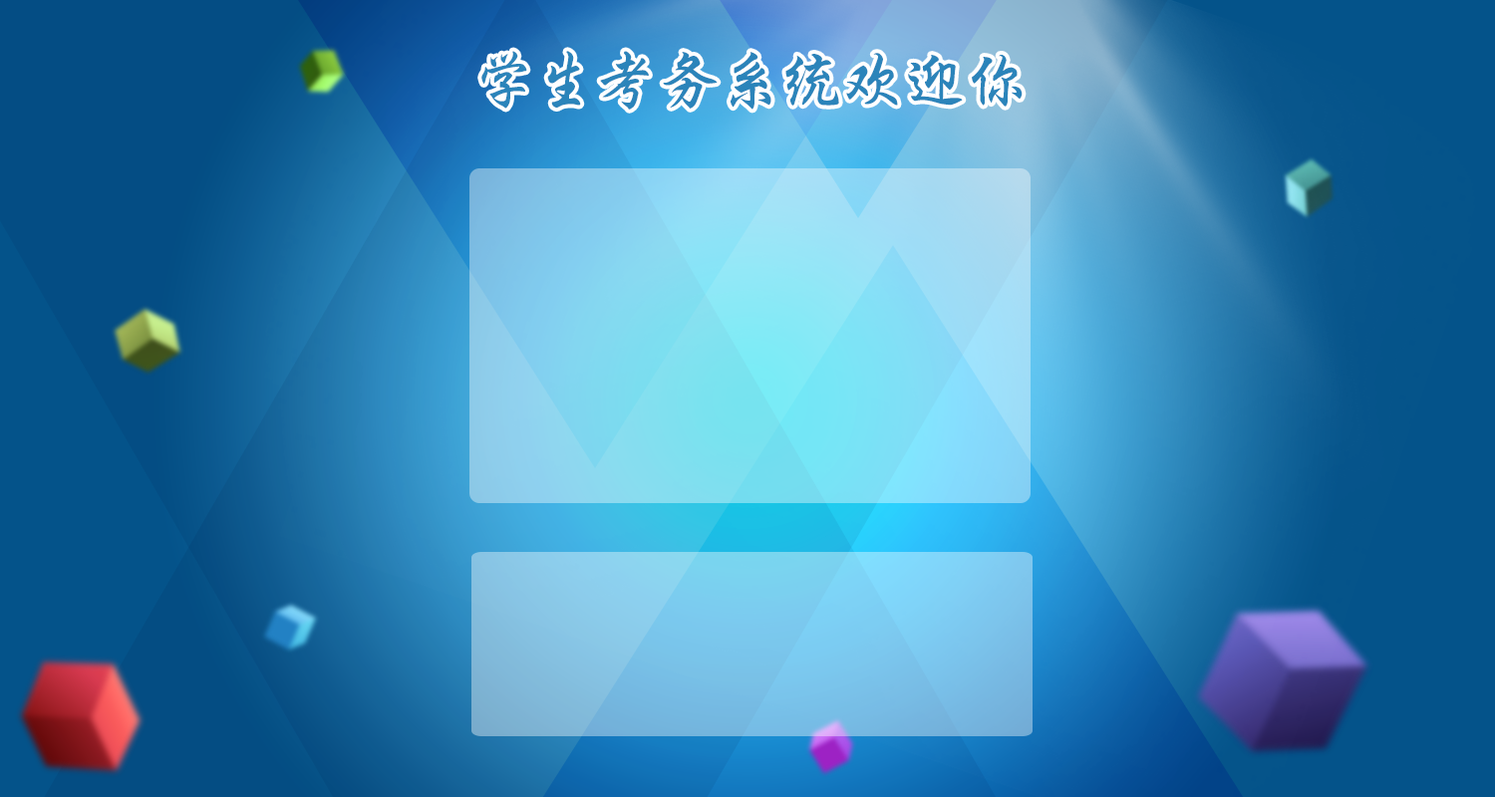
<style>
.page{position:relative;width:1495px;height:797px}
.page>*{position:absolute;margin:0}
.t1{font:64.8px "SingkaiEG-Bold-GB";letter-spacing:-0.05em;color:#2b85bb}
</style>
<div class="page">
<p class="t1" style="left:481px;top:51px;width:542px;height:59px">学生考务系统欢迎你</p>
</div>
